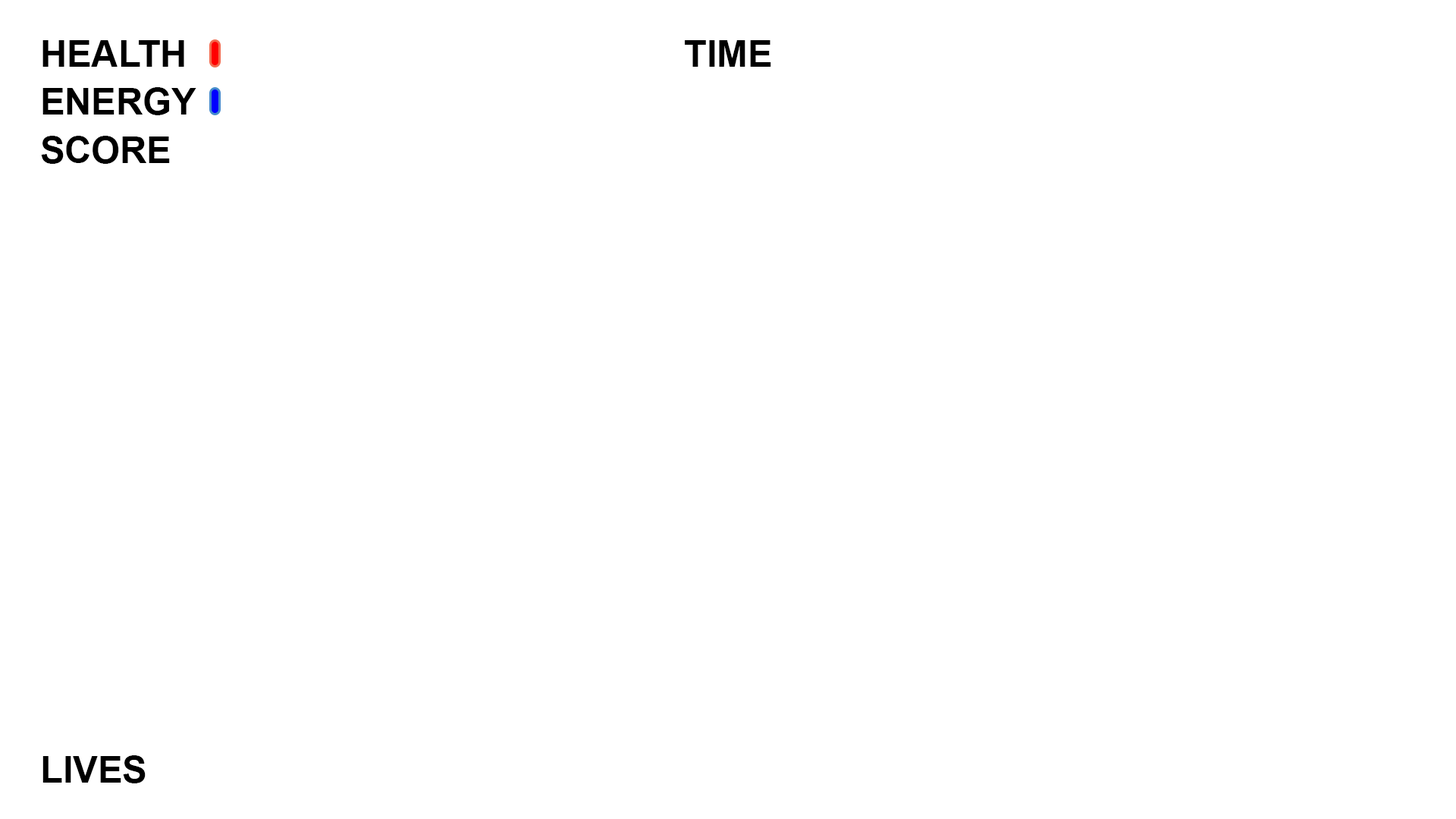
<style>
.page{position:relative;width:1456px;height:819px;background:#ffffff}
.page>*{position:absolute;margin:0}
.t1{font:37.2px "Arial-BoldMT";color:#000000}
</style>
<div class="page">
<p class="t1" style="left:42px;top:40px;width:142px;height:27px">HEALTH</p>
<p class="t1" style="left:685px;top:40px;width:86px;height:27px">TIME</p>
<p class="t1" style="left:42px;top:87px;width:154px;height:28px">ENERGY</p>
<p class="t1" style="left:41px;top:136px;width:129px;height:28px">SCORE</p>
<p class="t1" style="left:42px;top:755px;width:104px;height:28px">LIVES</p>
</div>
